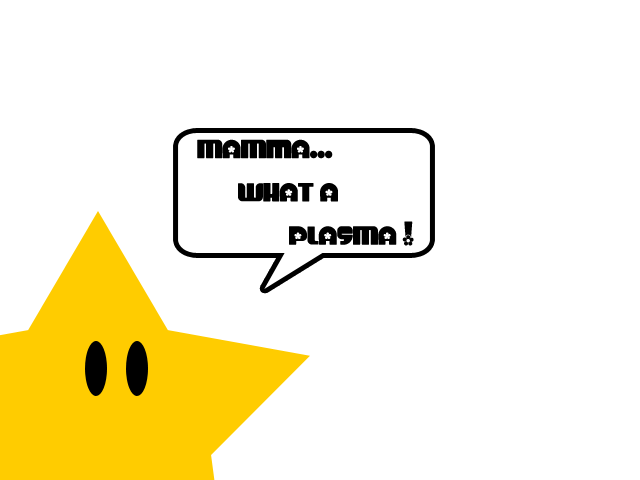
<style>
.page{position:relative;width:640px;height:480px;background:#ffffff}
.page>*{position:absolute;margin:0}
.t1{font:36px "Chick";color:#000000}
.t2{font:30px "Chick";color:#000000}
</style>
<div class="page">
<p class="t1" style="left:197px;top:139px;width:217px;height:107px">MAMmA<span class="t2">...<br>        </span>WHAT A<br>               PLASMA !</p>
</div>
